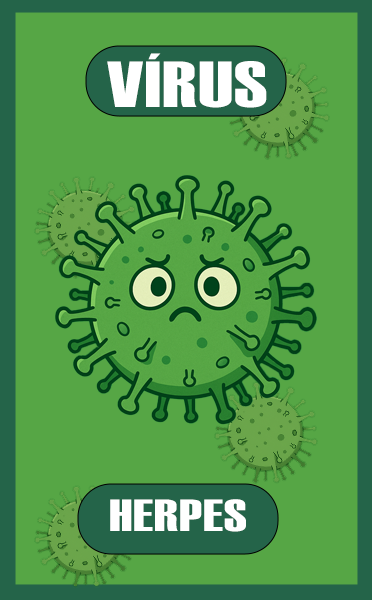
<style>
.page{position:relative;width:372px;height:600px;background:#56a645}
.page>*{position:absolute;margin:0}
.t1{font:65px "Haettenschweiler";letter-spacing:0.015em;color:#ffffff;scale:1.35 1}
.t2{font:45px "Haettenschweiler";letter-spacing:0.015em;color:#ffffff;scale:1.35 1}
</style>
<div class="page">
<p class="t1" style="left:107px;top:53px;width:160px;height:55px">VÍRUS</p>
<p class="t2" style="left:110px;top:499px;width:136px;height:33px">HERPES</p>
</div>
